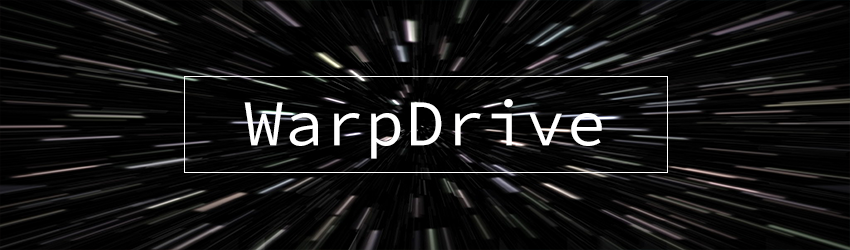
<style>
.page{position:relative;width:850px;height:250px}
.page>*{position:absolute;margin:0}
.t1{font:65px "SourceCodePro-Regular";letter-spacing:0.02em;color:#ffffff}
</style>
<div class="page">
<p class="t1" style="left:244px;top:99px;width:358px;height:60px">WarpDrive</p>
</div>
